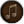
<style>
.page{position:relative;width:24px;height:24px}
.page>*{position:absolute;margin:0}
.t1{font:18.9px "Arial-BoldMT"}
</style>
<div class="page">
<p class="t1" style="left:4px;top:4px;width:13px;height:16px">♫</p>
</div>
